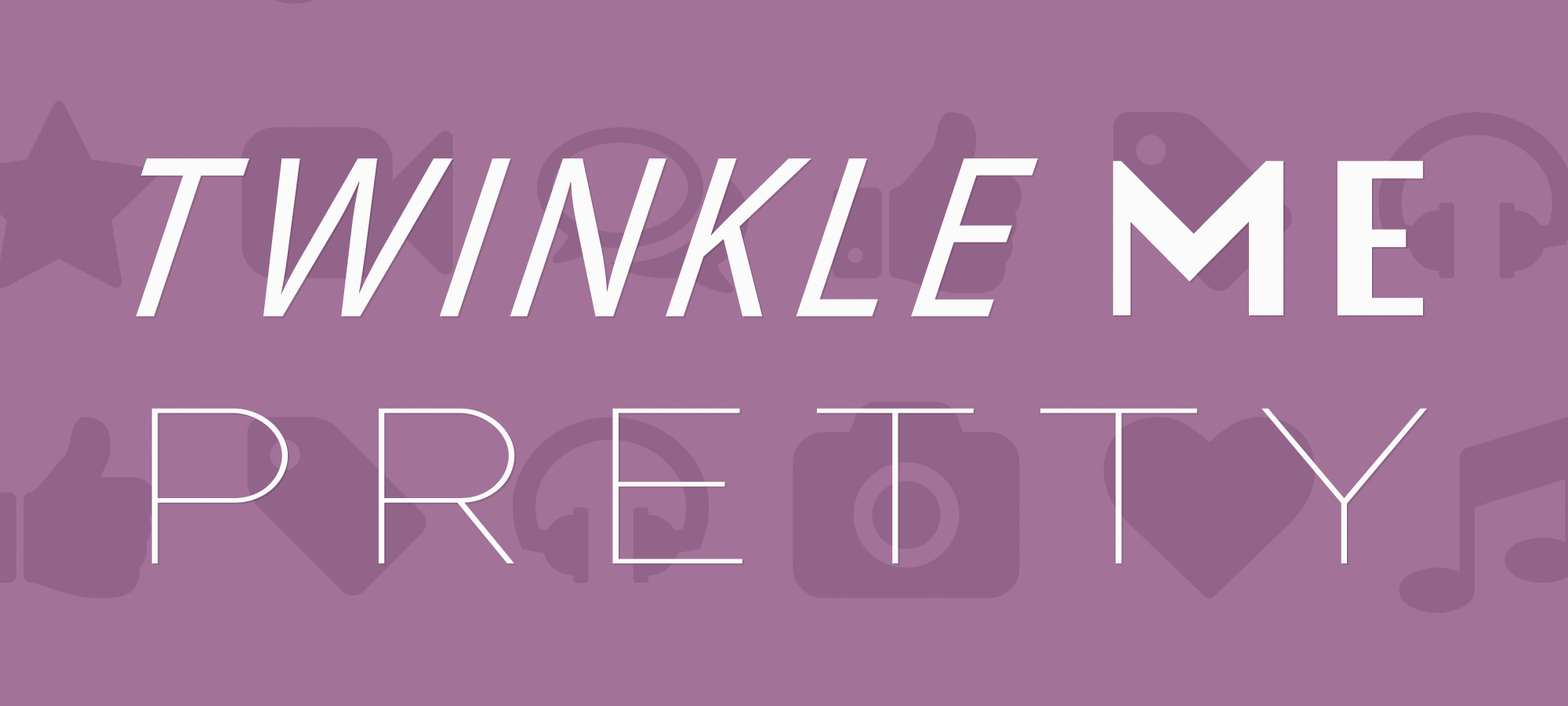
<style>
.page{position:relative;width:1568px;height:706px;background:#a27298}
.page>*{position:absolute;margin:0}
.t1{font:233.9px "MyriadPro-It";letter-spacing:0.095em;color:#fbfbfb;font-style:italic;scale:0.91 1}
.t2{font:205px "Silom";letter-spacing:0.075em;color:#fbfbfb;font-weight:bold}
.t3{font:218px "Raleway-Thin";letter-spacing:0.195em;color:#fbfbfb;scale:1.27 1}
</style>
<div class="page">
<p class="t1" style="left:136px;top:158px;width:902px;height:159px">TWINKLE</p>
<p class="t2" style="left:1112px;top:161px;width:311px;height:154px">ME</p>
<p class="t3" style="left:151px;top:408px;width:1276px;height:156px">PRETTY</p>
</div>
